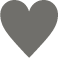
<style>
.page{position:relative;width:58px;height:58px;background:#706f6b}
.page>*{position:absolute;margin:0}
.t1{font:72px "KozGoPr6N-Regular";color:#706f6b}
</style>
<div class="page">
<p class="t1" style="left:0px;top:0px;width:58px;height:58px">♥</p>
</div>
